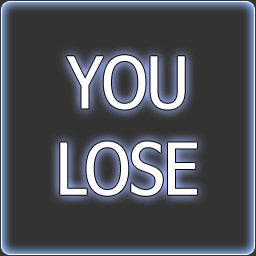
<style>
.page{position:relative;width:256px;height:256px;background:#333333}
.page>*{position:absolute;margin:0}
.t1{font:72px "Nina";color:#ffffff}
</style>
<div class="page">
<p class="t1" style="left:60px;top:55px;width:137px;height:141px;text-align:center">YOU<br>LOSE</p>
</div>
